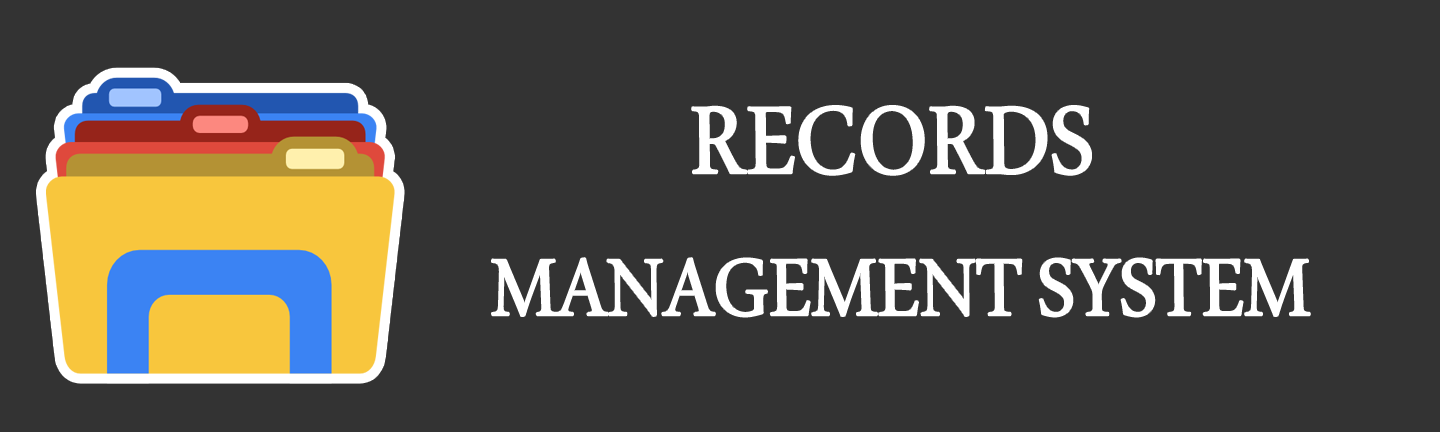
<style>
.page{position:relative;width:1440px;height:432px;background:#333333}
.page>*{position:absolute;margin:0}
.t1{font:118.3px "MicrosoftUighur";color:#ffffff;scale:0.9 1}
.t2{font:140.3px "MicrosoftUighur";color:#ffffff;scale:0.9 1}
</style>
<div class="page">
<p class="t1" style="left:492px;top:106px;width:818px;height:211px;text-align:center"><span class="t2">RECORDS<br></span> MANAGEMENT SYSTEM</p>
</div>
